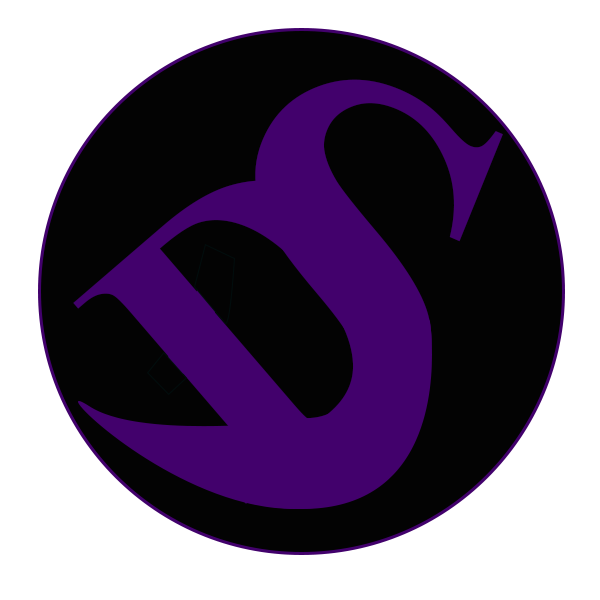
<style>
.page{position:relative;width:600px;height:600px;background:#ffffff}
.page>*{position:absolute;margin:0}
.t1{font:522.1px "TimesNewRomanPS-BoldMT";color:#42016c}
.t2{font:399.5px "TimesNewRomanPS-BoldMT";color:#42016c}
</style>
<div class="page">
<p class="t1" style="left:158px;top:79px;width:345px;height:362px;rotate:23deg">S</p>
<p class="t2" style="left:73px;top:180px;width:324px;height:324px;rotate:-41deg">D</p>
</div>
